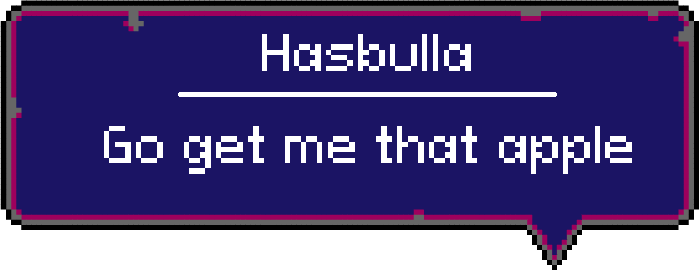
<style>
.page{position:relative;width:699px;height:270px;background:#1b1464}
.page>*{position:absolute;margin:0}
.t1{font:48px "PixeloidSans";color:#ffffff}
</style>
<div class="page">
<p class="t1" style="left:262px;top:34px;width:209px;height:37px">Hasbulla</p>
<p class="t1" style="left:104px;top:126px;width:528px;height:48px">Go get me that apple</p>
</div>
